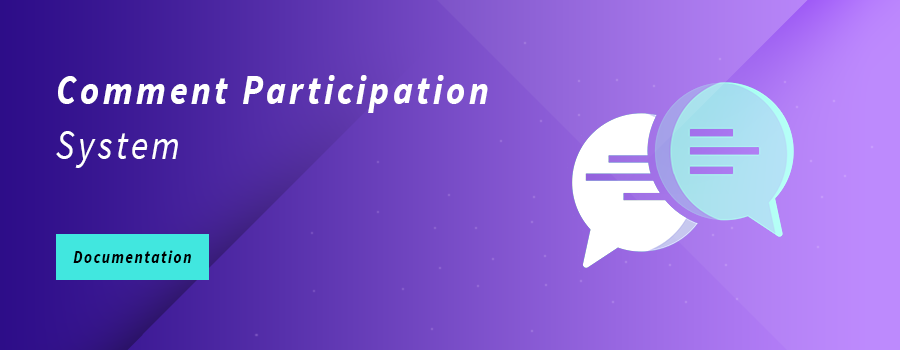
<style>
.page{position:relative;width:900px;height:350px}
.page>*{position:absolute;margin:0}
.t1{font:42.1px/55px "SourceSansPro-BoldItalic";letter-spacing:0.1em;color:#ffffff;scale:0.85 1}
.t2{font:42.1px/55px "SourceSansPro-Italic";letter-spacing:0.1em;color:#ffffff;scale:0.85 1}
</style>
<div class="page">
<p class="t1" style="left:56px;top:75px;width:432px;height:93px">Comment Participation<br><span class="t2">System</span></p>
</div>
